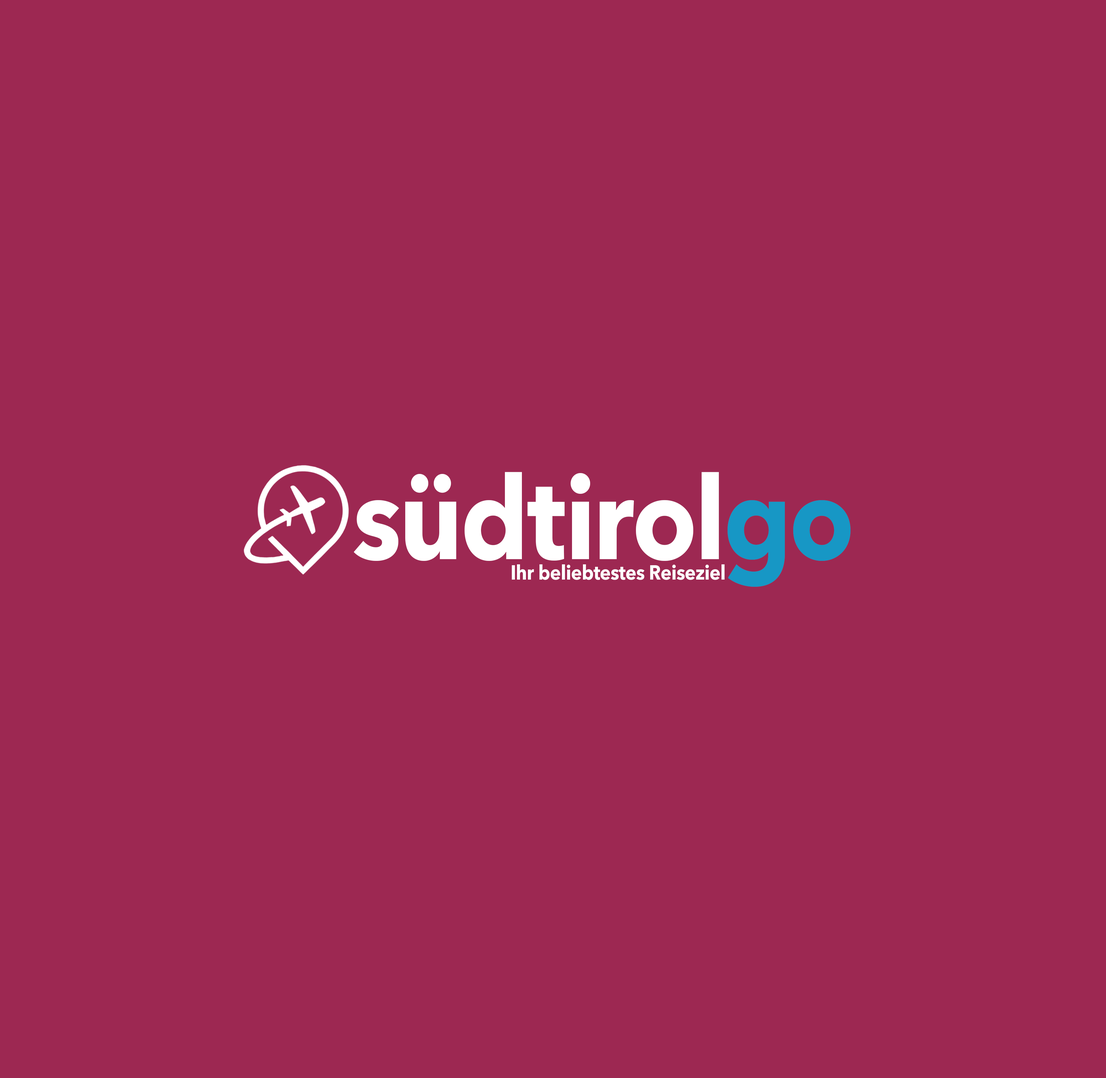
<style>
.page{position:relative;width:1106px;height:1078px;background:#9d2852}
.page>*{position:absolute;margin:0}
.t1{font:115.2px "AvenirNextLTPro-Bold";letter-spacing:-0.01em;color:#ffffff;scale:0.9 1}
.t2{font:115.2px "AvenirNextLTPro-Bold";letter-spacing:-0.01em;color:#1797c5;scale:0.9 1}
.t3{font:20.2px "AvenirNextLTPro-Bold";letter-spacing:-0.01em;color:#ffffff;scale:0.9 1}
</style>
<div class="page">
<p class="t1" style="left:354px;top:472px;width:365px;height:89px">südtirol</p>
<p class="t2" style="left:727px;top:500px;width:123px;height:87px">go</p>
<p class="t3" style="left:512px;top:564px;width:213px;height:16px">Ihr beliebtestes Reiseziel</p>
</div>
